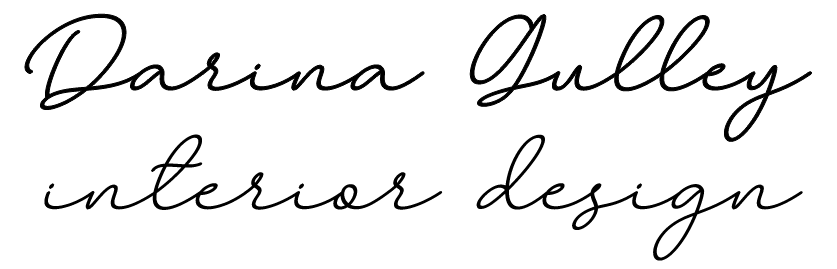
<style>
.page{position:relative;width:837px;height:269px;background:#ffffff}
.page>*{position:absolute;margin:0}
.t1{font:50px "Larianti";color:#000000}
.t2{font:12px "Larianti";color:#000000}
</style>
<div class="page">
<p class="t1" style="left:25px;top:14px;width:787px;height:128px">Darina Gulley</p>
<p class="t2" style="left:44px;top:134px;width:759px;height:127px">interior design</p>
</div>
